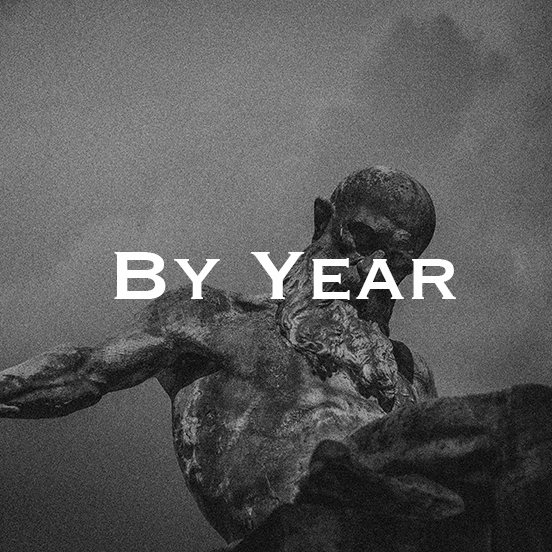
<style>
.page{position:relative;width:552px;height:552px}
.page>*{position:absolute;margin:0}
.t1{font:90px "Copperplate";color:#fefefe}
</style>
<div class="page">
<p class="t1" style="left:114px;top:252px;width:342px;height:48px">By Year</p>
</div>
